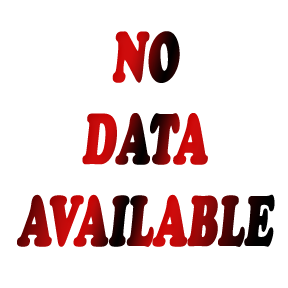
<style>
.page{position:relative;width:288px;height:288px;background:#ffffff}
.page>*{position:absolute;margin:0}
.t1{font:68.3px "CooperBlackStd";font-weight:bold;font-style:italic;scale:0.56 1}
</style>
<div class="page">
<p class="t1" style="left:17px;top:31px;width:258px;height:216px;text-align:center">NO<br>DATA<br>AVAILABLE</p>
</div>
